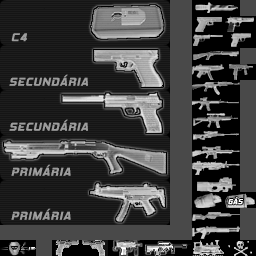
<style>
.page{position:relative;width:256px;height:256px;background:#1d1d1d}
.page>*{position:absolute;margin:0}
.t1{font:11.5px "HemiHeadRg-BoldItalic";letter-spacing:0.08em;color:#9d9d9d;text-transform:uppercase}
.t2{font:7.5px "HemiHeadRg-BoldItalic";letter-spacing:0.08em;color:#ffffff;text-transform:uppercase;scale:0.92 1}
</style>
<div class="page">
<p class="t1" style="left:9px;top:74px;width:79px;height:12px">SECUNDÁRIA</p>
<p class="t1" style="left:9px;top:119px;width:79px;height:12px">SECUNDÁRIA</p>
<p class="t1" style="left:11px;top:164px;width:60px;height:12px">PRIMÁRIA</p>
<p class="t2" style="left:228px;top:197px;width:15px;height:8px">gás</p>
<p class="t1" style="left:11px;top:208px;width:60px;height:12px">PRIMÁRIA</p>
</div>
